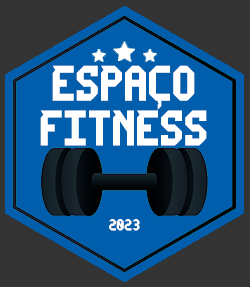
<style>
.page{position:relative;width:250px;height:287px;background:#005eac}
.page>*{position:absolute;margin:0}
.t1{font:35.7px/44.6px "MrTech-LySt";color:#ffffff}
.t2{font:11.6px "MrTech-LySt";color:#ffffff}
</style>
<div class="page">
<p class="t1" style="left:40px;top:65px;width:167px;height:81px;text-align:center">ESPAÇO<br>FITNESS</p>
<p class="t2" style="left:109px;top:219px;width:31px;height:12px">2023</p>
</div>
